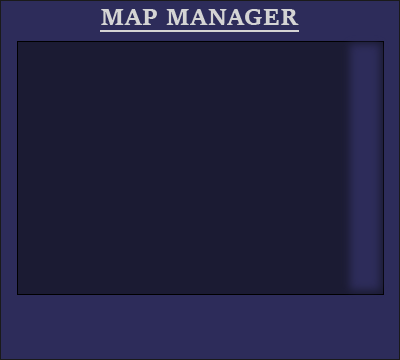
<style>
.page{position:relative;width:400px;height:360px;background:#1b1b33}
.page>*{position:absolute;margin:0}
.t1{font:24px "SitkaSmall-Bold";color:#d4d4d4}
</style>
<div class="page">
<p class="t1" style="left:101px;top:9px;width:198px;height:16px">MAP MANAGER</p>
</div>
